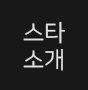
<style>
.page{position:relative;width:88px;height:90px;background:#181818}
.page>*{position:absolute;margin:0}
.t1{font:23px "NanumSquareR";color:#e2e2e2}
</style>
<div class="page">
<p class="t1" style="left:23px;top:21px;width:42px;height:23px">스타</p>
<p class="t1" style="left:23px;top:49px;width:40px;height:22px">소개</p>
</div>
